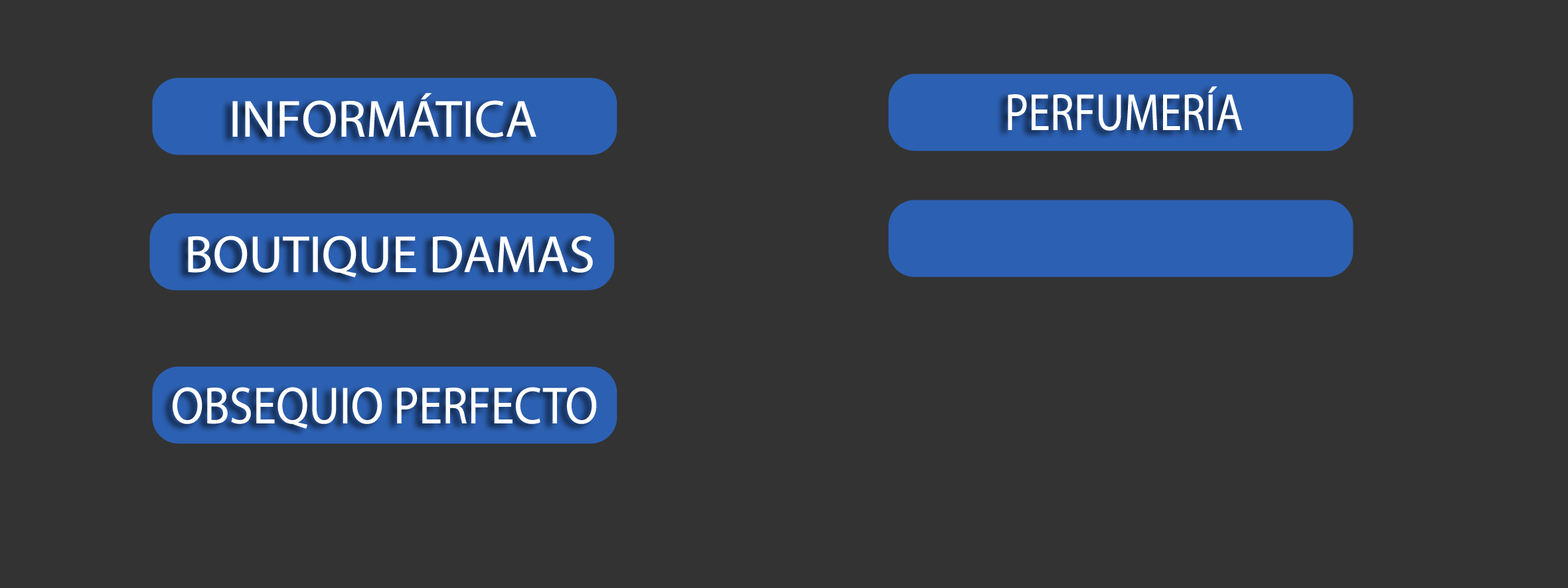
<style>
.page{position:relative;width:1568px;height:588px;background:#333333}
.page>*{position:absolute;margin:0}
.t1{font:52.5px "MyriadPro-Regular";color:#ffffff;scale:0.84 1}
.t2{font:52.5px "MyriadPro-Regular";color:#ffffff}
.t3{font:52.5px "MyriadPro-Regular";color:#ffffff;scale:0.9 1}
</style>
<div class="page">
<p class="t1" style="left:1008px;top:86px;width:234px;height:45px">PERFUMERÍA</p>
<p class="t2" style="left:232px;top:93px;width:304px;height:44px">INFORMÁTICA</p>
<p class="t2" style="left:188px;top:236px;width:405px;height:41px">BOUTIQUE DAMAS</p>
<p class="t3" style="left:173px;top:387px;width:424px;height:42px">OBSEQUIO PERFECTO</p>
</div>
